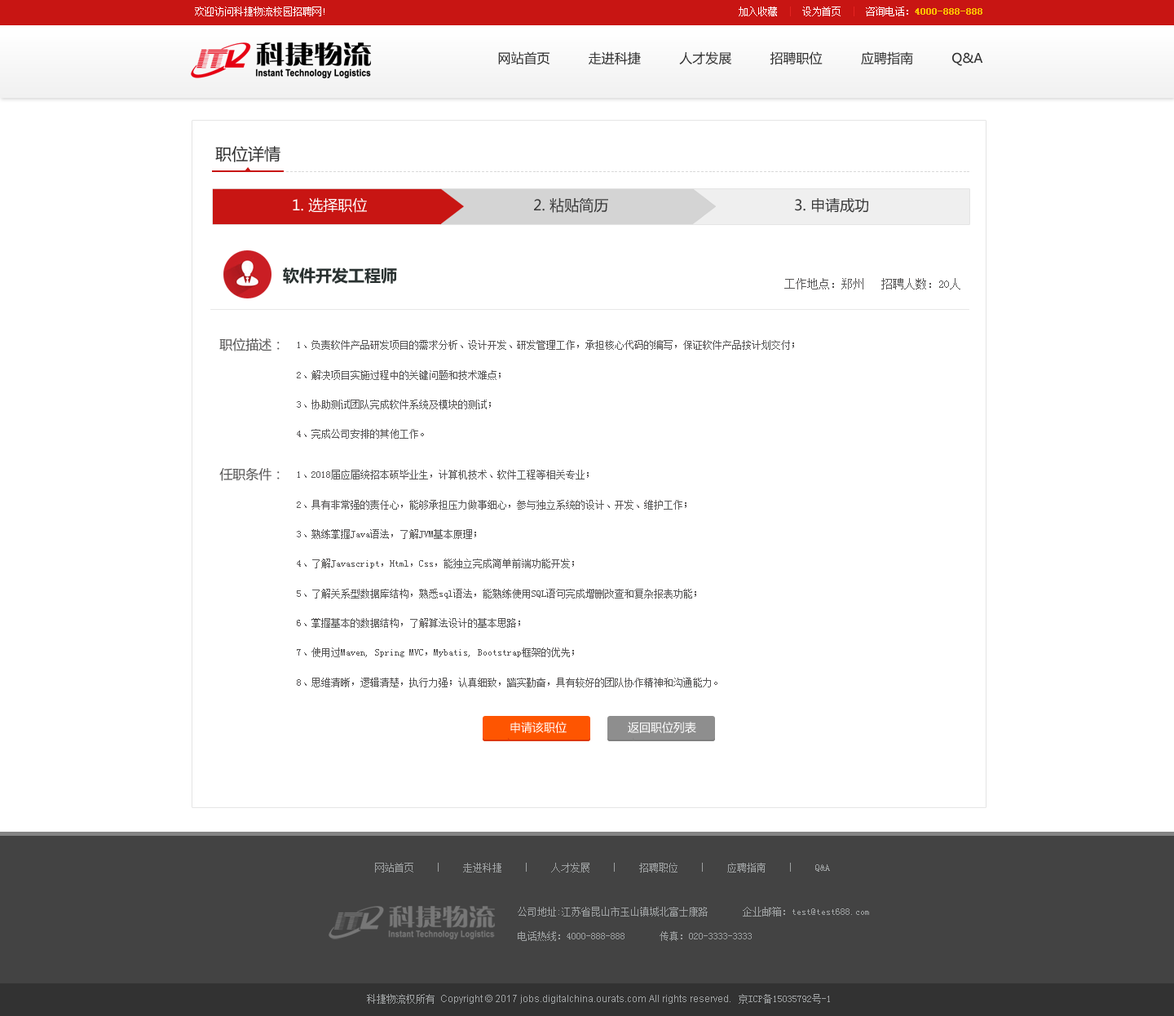
<style>
.page{position:relative;width:1174px;height:1016px;background:#ffffff}
.page>*{position:absolute;margin:0}
.t1{font:9.8px "SimSun";color:#ffffff}
.t2{font:9.8px "SimSun";color:#febf00;font-weight:bold}
.t3{font:9.8px "SimSun";color:#e62422}
.t4{font:13px "MicrosoftYaHei";color:#313131}
.t5{font:16.3px "MicrosoftYaHei";color:#333333}
.t6{font:6.5px "SimSun";letter-spacing:0.1em;color:#d9d9d9}
.t7{font:14.7px "MicrosoftYaHei";color:#ffffff}
.t8{font:14.7px "MicrosoftYaHei";color:#3a3a3a}
.t9{font:16.3px "MicrosoftYaHei-Bold";color:#2a3231}
.t10{font:11.4px "SimSun";color:#575656}
.t11{font:13px "MicrosoftYaHei";color:#575656}
.t12{font:9.8px/20.4px "SimSun";color:#575656}
.t13{font:11.4px "MicrosoftYaHei";color:#ffffff}
.t14{font:9.8px "SimSun";color:#9ea1a2}
.t15{font:9.8px/12.2px "SimSun";color:#9ea1a2}
.t16{font:9.8px "ArialMT";color:#9ea1a2}
</style>
<div class="page">
<p class="t1" style="left:195px;top:7px;width:129px;height:9px">欢迎访问科捷物流校园招聘网!</p>
<p class="t2" style="left:739px;top:7px;width:243px;height:9px"><span class="t1"> 加入收藏</span><span class="t3">  |  </span><span class="t1">设为首页</span><span class="t3">  |  </span><span class="t1">咨询电话：</span>4000-888-888</p>
<p class="t4" style="left:498px;top:51px;width:485px;height:15px">网站首页          走进科捷          人才发展          招聘职位          应聘指南          Q&amp;A</p>
<p class="t5" style="left:215px;top:146px;width:65px;height:16px">职位详情</p>
<p class="t6" style="left:286px;top:171px;width:683px;height:1px">-------------------------------------------------------------------------------------------------------------------------------------------------------------------------------</p>
<p class="t7" style="left:293px;top:197px;width:74px;height:16px">1. 选择职位</p>
<p class="t8" style="left:534px;top:198px;width:74px;height:15px">2. 粘贴简历</p>
<p class="t8" style="left:795px;top:198px;width:73px;height:15px">3. 申请成功</p>
<p class="t9" style="left:283px;top:267px;width:114px;height:17px">软件开发工程师</p>
<p class="t10" style="left:784px;top:278px;width:176px;height:11px">工作地点：郑州   招聘人数：20人</p>
<p class="t11" style="left:219px;top:338px;width:61px;height:13px">职位描述：</p>
<p class="t12" style="left:297px;top:340px;width:497px;height:99px">1、负责软件产品研发项目的需求分析、设计开发、研发管理工作，承担核心代码的编写，保证软件产品按计划交付；<br>2、解决项目实施过程中的关键问题和技术难点；<br>3、协助测试团队完成软件系统及模块的测试；<br>4、完成公司安排的其他工作。</p>
<p class="t11" style="left:219px;top:468px;width:61px;height:13px">任职条件：</p>
<p class="t12" style="left:297px;top:470px;width:420px;height:217px">1、2018届应届统招本硕毕业生，计算机技术、软件工程等相关专业；<br>2、具有非常强的责任心，能够承担压力做事细心，参与独立系统的设计、开发、维护工作；<br>3、熟练掌握Java语法，了解JVM基本原理；<br>4、了解Javascript，Html，Css，能独立完成简单前端功能开发；<br>5、了解关系型数据库结构，熟悉sql语法，能熟练使用SQL语句完成增删改查和复杂报表功能；<br>6、掌握基本的数据结构，了解算法设计的基本思路；<br>7、使用过Maven, Spring MVC，Mybatis, Bootstrap框架的优先；<br>8、思维清晰，逻辑清楚，执行力强；认真细致，踏实勤奋，具有较好的团队协作精神和沟通能力。</p>
<p class="t13" style="left:510px;top:721px;width:57px;height:12px">申请该职位</p>
<p class="t13" style="left:628px;top:721px;width:68px;height:12px">返回职位列表</p>
<p class="t14" style="left:375px;top:863px;width:455px;height:9px">网站首页　　｜　　走进科捷　　｜　　人才发展　　｜　　招聘职位　　｜　　应聘指南　　｜　　Q&amp;A</p>
<p class="t15" style="left:518px;top:907px;width:351px;height:34px">公司地址:江苏省昆山市玉山镇城北富士康路 　　　企业邮箱：test@test688.com<br><br>电话热线：4000-888-888 　　　传真：020-3333-3333</p>
<p class="t16" style="left:367px;top:994px;width:463px;height:10px"><span class="t14">科捷物流权所有 </span>Copyright © 2017 jobs.digitalchina.ourats.com All rights reserved.   <span class="t14">京ICP备15035792号-1</span></p>
</div>
